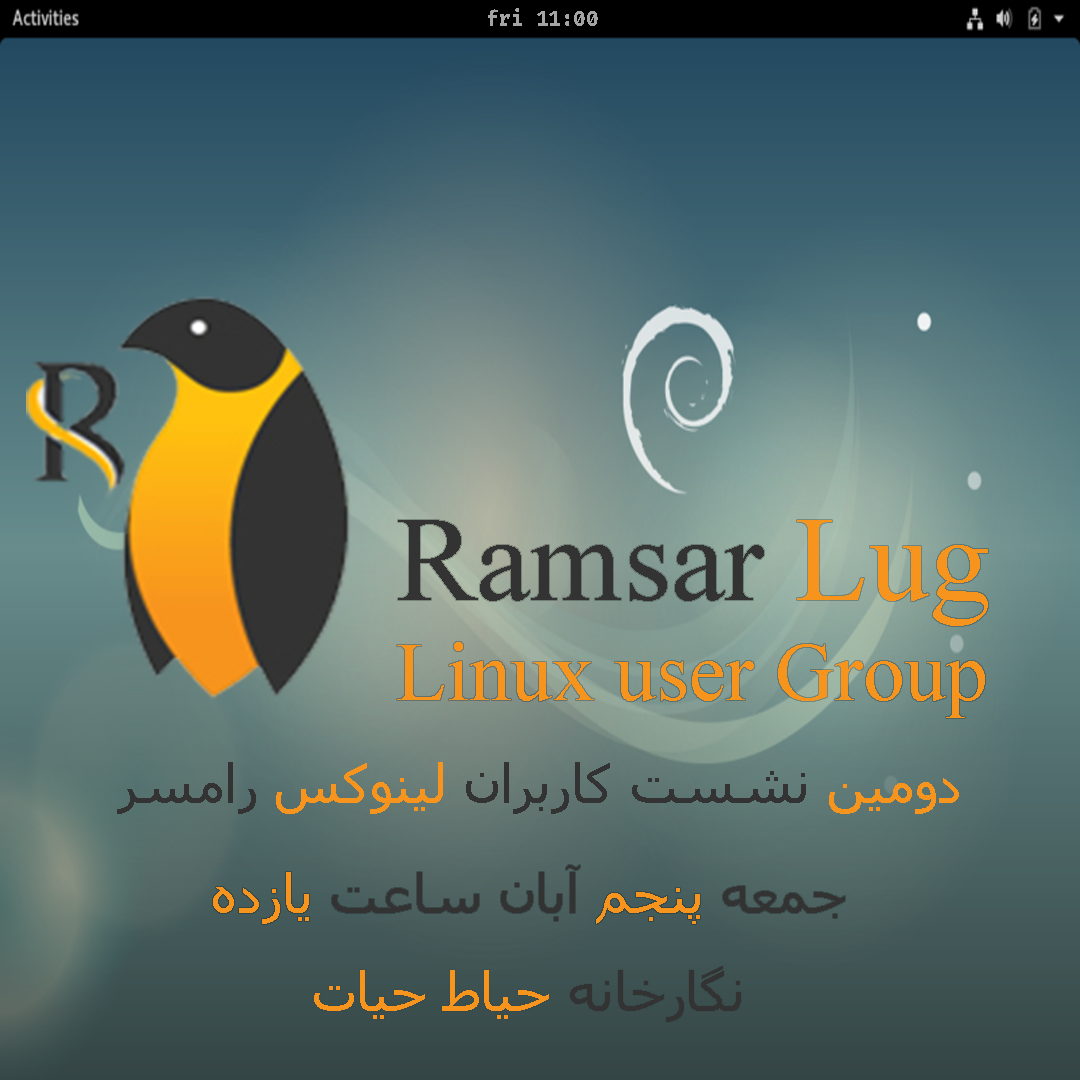
<style>
.page{position:relative;width:1080px;height:1080px}
.page>*{position:absolute;margin:0}
.t1{font:20.8px "FiraCode-Bold";color:#a4a4a4}
.t2{font:83.3px "TimesNewRomanPSMT";color:#f7941d}
.t3{font:120.8px "TimesNewRomanPSMT";color:#333333}
.t4{font:120.8px "TimesNewRomanPSMT";color:#f7941d}
.t5{font:54.2px "Tahoma";color:#333333}
.t6{font:54.2px "Tahoma";color:#f7941d}
</style>
<div class="page">
<p class="t1" style="left:488px;top:8px;width:110px;height:18px">fri 11:00</p>
<p class="t2" style="left:397px;top:520px;width:591px;height:198px;text-align:right"><span class="t3">Ramsar </span><span class="t4">Lug<br></span>Linux user Group</p>
<p class="t5" style="left:117px;top:762px;width:842px;height:52px"><span class="t6">دومین</span> نشست کاربران <span class="t6">لینوکس</span> رامسر</p>
<p class="t5" style="left:213px;top:865px;width:632px;height:59px">جمعه<span class="t6"> پنجم</span> آبان ساعت <span class="t6">یازده</span></p>
<p class="t6" style="left:314px;top:966px;width:427px;height:56px"><span class="t5">نگارخانه </span>حیاط حیات</p>
</div>
